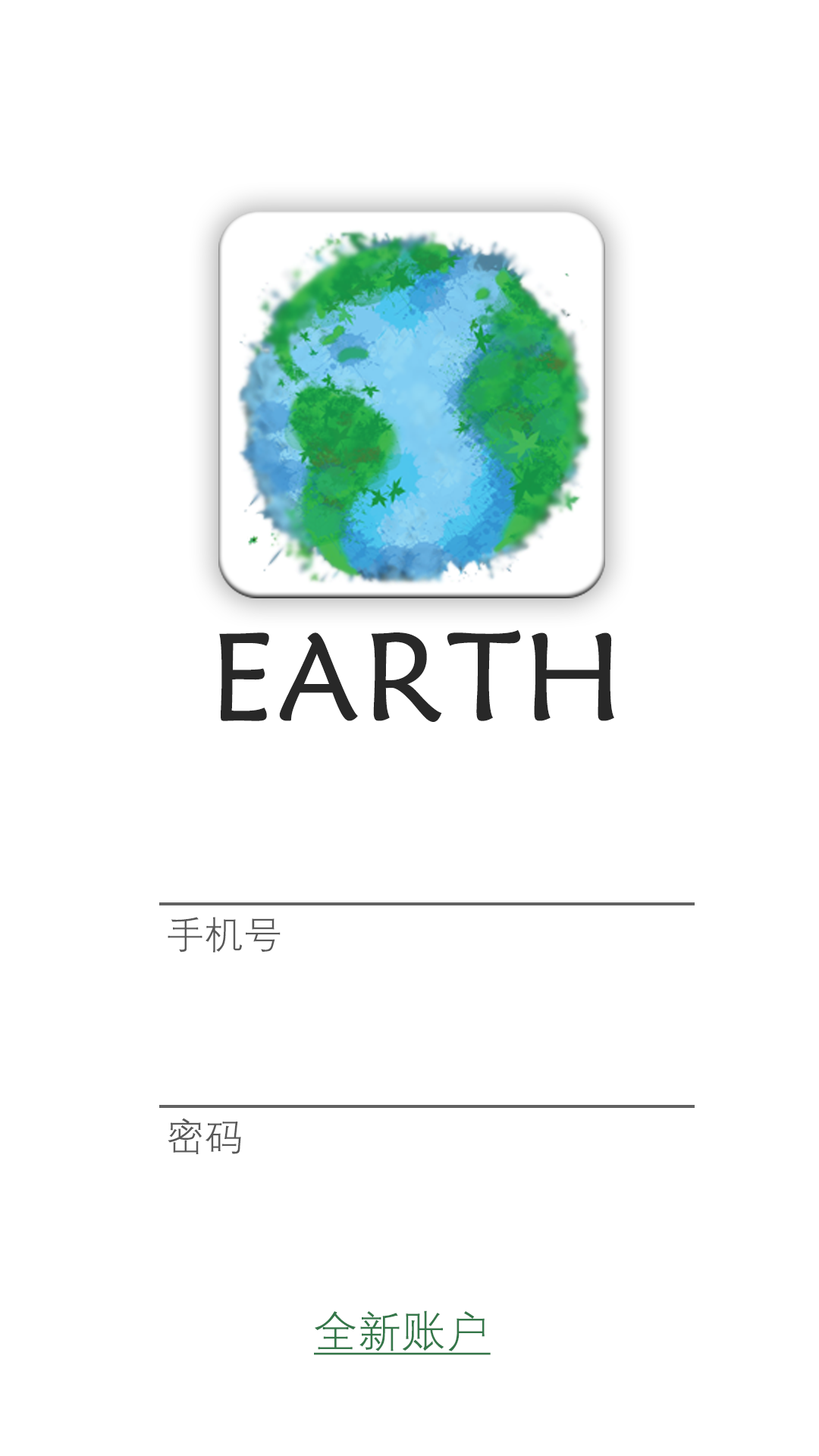
<style>
.page{position:relative;width:819px;height:1456px;background:#ffffff}
.page>*{position:absolute;margin:0}
.t1{font:124.4px "STXinwei";color:#282828;font-weight:bold}
.t2{font:37.9px "DengXian-Light";color:#585858;font-weight:bold}
.t3{font:42.9px "DengXian-Light";color:#347749;font-weight:bold;text-decoration:underline}
</style>
<div class="page">
<p class="t1" style="left:219px;top:629px;width:395px;height:93px">EARTH</p>
<p class="t2" style="left:168px;top:917px;width:113px;height:35px">手机号</p>
<p class="t2" style="left:168px;top:1118px;width:73px;height:36px">密码</p>
<p class="t3" style="left:314px;top:1310px;width:177px;height:45px">全新账户</p>
</div>
